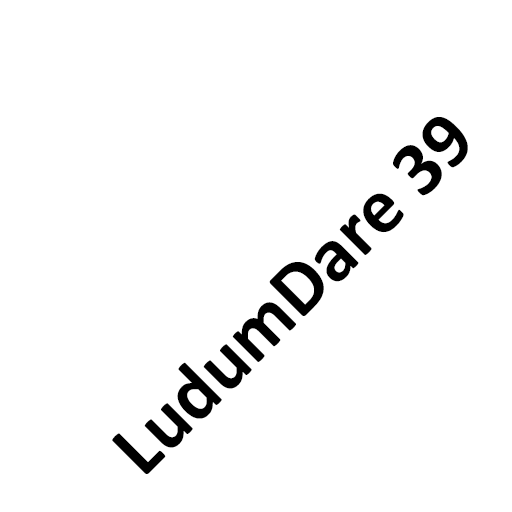
<style>
.page{position:relative;width:512px;height:512px;background:#ffffff}
.page>*{position:absolute;margin:0}
.t1{font:79px "Calibri-Bold";color:#000000}
</style>
<div class="page">
<p class="t1" style="left:112px;top:117px;width:356px;height:357px;rotate:-45deg">LudumDare 39</p>
</div>
